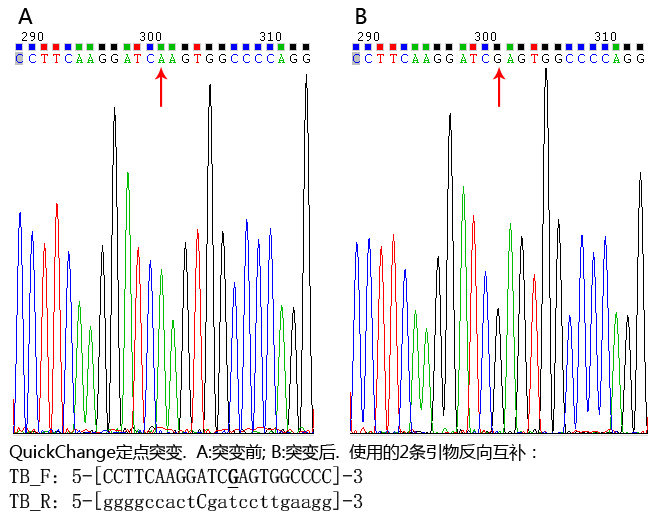
<style>
.page{position:relative;width:661px;height:519px;background:#ffffff}
.page>*{position:absolute;margin:0}
.t1{font:20.8px "MicrosoftYaHei";color:#010101}
.t2{font:20.8px "·ÂËÎ";color:#010101}
.t3{font:16.7px "MicrosoftYaHei";color:#010101}
.t4{font:20.8px "·ÂËÎ";color:#010101;font-weight:bold;text-decoration:underline}
</style>
<div class="page">
<p class="t1" style="left:18px;top:8px;width:349px;height:16px">A           B</p>
<p class="t2" style="left:9px;top:443px;width:527px;height:68px"><span class="t3">QuickChange定点突变.  A:突变前; B:突变后.  使用的2条引物反向互补： <br></span>TB_F: 5-[CCTTCAAGGATC<span class="t4">G</span>AGTGGCCCC]-3<br>TB_R: 5-[ggggccactCgatccttgaagg]-3</p>
</div>
